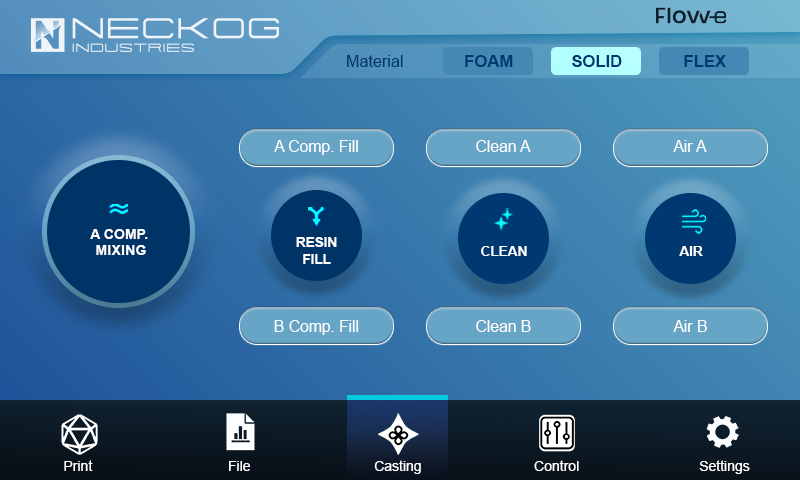
<style>
.page{position:relative;width:800px;height:480px}
.page>*{position:absolute;margin:0}
.t1{font:16.2px "ArialMT";color:#003467}
.t2{font:16.7px "Arial-BoldMT";color:#003971}
.t3{font:15.6px "ArialMT";color:#ffffff}
.t4{font:13.5px "Arial-BoldMT";color:#ffffff;text-transform:uppercase}
.t5{font:13.5px "Arial-BoldMT";color:#ffffff}
.t6{font:14px "ArialMT";color:#ffffff}
</style>
<div class="page">
<p class="t1" style="left:347px;top:55px;width:56px;height:12px">Material</p>
<p class="t2" style="left:465px;top:55px;width:48px;height:12px">FOAM</p>
<p class="t2" style="left:572px;top:55px;width:50px;height:12px">SOLID</p>
<p class="t2" style="left:684px;top:55px;width:42px;height:12px">FLEX</p>
<p class="t3" style="left:274px;top:140px;width:84px;height:15px">A Comp. Fill</p>
<p class="t3" style="left:476px;top:140px;width:55px;height:12px">Clean A</p>
<p class="t3" style="left:673px;top:140px;width:34px;height:12px">Air A</p>
<p class="t4" style="left:90px;top:229px;width:58px;height:26px;text-align:center">A Comp. <br>Mixing</p>
<p class="t5" style="left:296px;top:237px;width:41px;height:27px;text-align:center">RESIN<br>FILL</p>
<p class="t5" style="left:481px;top:246px;width:46px;height:10px">CLEAN</p>
<p class="t5" style="left:679px;top:246px;width:24px;height:10px">AIR</p>
<p class="t3" style="left:274px;top:320px;width:85px;height:15px">B Comp. Fill</p>
<p class="t3" style="left:476px;top:320px;width:55px;height:12px">Clean B</p>
<p class="t3" style="left:673px;top:320px;width:34px;height:12px">Air B</p>
<p class="t6" style="left:64px;top:460px;width:29px;height:11px">Print</p>
<p class="t6" style="left:229px;top:461px;width:21px;height:10px">File</p>
<p class="t6" style="left:374px;top:460px;width:47px;height:14px">Casting</p>
<p class="t6" style="left:534px;top:460px;width:45px;height:11px">Control</p>
<p class="t6" style="left:699px;top:460px;width:51px;height:14px">Settings</p>
</div>
